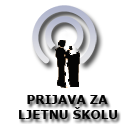
<style>
.page{position:relative;width:130px;height:130px;background:#ffffff}
.page>*{position:absolute;margin:0}
.t1{font:12px "Verdana-Bold";color:#040404}
</style>
<div class="page">
<p class="t1" style="left:27px;top:95px;width:81px;height:9px">PRIJAVA ZA</p>
<p class="t1" style="left:19px;top:107px;width:99px;height:12px">LJETNU ŠKOLU</p>
</div>
